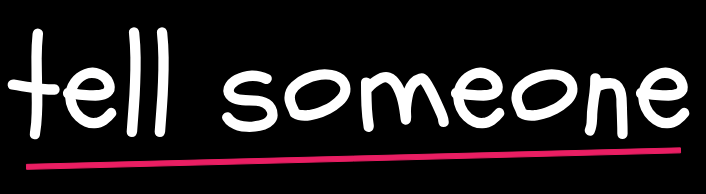
<style>
.page{position:relative;width:706px;height:194px;background:#000000}
.page>*{position:absolute;margin:0}
.t1{font:134px "Schoolbell-Regular";color:#ffffff}
</style>
<div class="page">
<p class="t1" style="left:7px;top:27px;width:683px;height:113px">tell someone</p>
</div>
